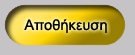
<style>
.page{position:relative;width:135px;height:55px;background:#c6c3c6}
.page>*{position:absolute;margin:0}
.t1{font:14.7px "ArialMT";color:#000000}
</style>
<div class="page">
<p class="t1" style="left:24px;top:19px;width:83px;height:14px">Αποθήκευση</p>
</div>
